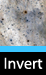
<style>
.page{position:relative;width:46px;height:75px;background:#000000}
.page>*{position:absolute;margin:0}
.t1{font:16px "MyriadPro-Regular";color:#fffefe}
</style>
<div class="page">
<p class="t1" style="left:4px;top:57px;width:39px;height:12px">Invert</p>
</div>
